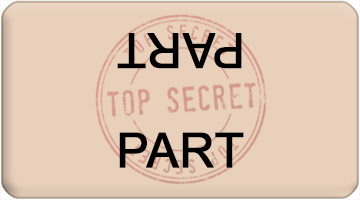
<style>
.page{position:relative;width:360px;height:200px;background:#e8d0bb}
.page>*{position:absolute;margin:0}
.t1{font:48px "ArialMT";color:#000000;font-weight:bold}
</style>
<div class="page">
<p class="t1" style="left:117px;top:33px;width:125px;height:36px;rotate:180deg">PART</p>
<p class="t1" style="left:119px;top:132px;width:125px;height:36px">PART</p>
</div>
